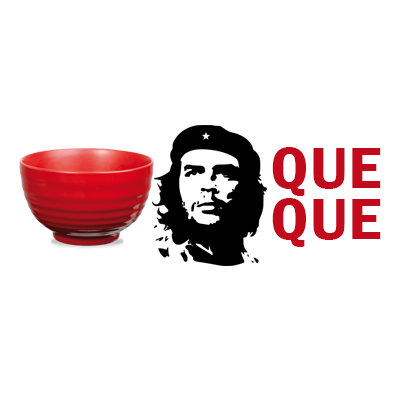
<style>
.page{position:relative;width:400px;height:400px;background:#ffffff}
.page>*{position:absolute;margin:0}
.t1{font:59.8px/50.8px "FranklinGothic-DemiCond";color:#c20a1d;scale:1.15 1}
</style>
<div class="page">
<p class="t1" style="left:272px;top:147px;width:109px;height:100px;text-align:center">QUE<br>QUE</p>
</div>
